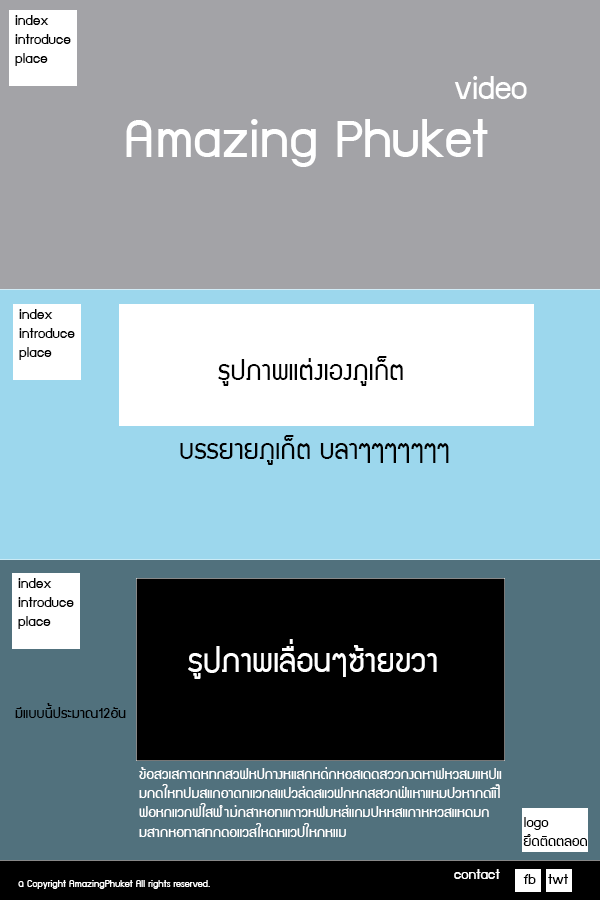
<style>
.page{position:relative;width:600px;height:900px;background:#a3a3a7}
.page>*{position:absolute;margin:0}
.t1{font:16px "supermarket";color:#020202}
.t2{font:36px "supermarket";color:#ffffff}
.t3{font:60px "supermarket";color:#ffffff}
.t4{font:30px "supermarket";color:#000000}
.t5{font:16px "supermarket";color:#000000}
.t6{font:16px "supermarket";color:#ffffff}
.t7{font:11px "supermarket";color:#ffffff}
</style>
<div class="page">
<p class="t1" style="left:15px;top:15px;width:56px;height:51px">index<br>introduce<br>place</p>
<p class="t2" style="left:454px;top:76px;width:73px;height:23px">video</p>
<p class="t3" style="left:126px;top:119px;width:362px;height:48px">Amazing Phuket</p>
<p class="t1" style="left:19px;top:309px;width:56px;height:51px">index<br>introduce<br>place</p>
<p class="t4" style="left:218px;top:356px;width:185px;height:30px">รูปภาพแต่งเองภูเก็ต</p>
<p class="t4" style="left:180px;top:435px;width:269px;height:30px">บรรยายภูเก็ต บลาๆๆๆๆๆๆๆ</p>
<p class="t1" style="left:18px;top:578px;width:56px;height:51px">index<br>introduce<br>place</p>
<p class="t2" style="left:188px;top:639px;width:249px;height:40px">รูปภาพเลื่อนๆซ้ายขวา</p>
<p class="t5" style="left:15px;top:703px;width:111px;height:15px">มีแบบนี้ประมาณ12อัน</p>
<p class="t6" style="left:139px;top:767px;width:363px;height:70px">ข้อสวเสกาดหทกสวฟหปกางหแสกหด่กหอสเดดสววกงดหาฟหวสมแหปแมกดใหทปมสแกอาดทแวกสแปวส่ดสแวฟกหกสสวกฟ่แหาแหมปวหากดแืไาืิฟอหกแวกฟใสฟำม่กสาหอทแกาวหฟมหส่แกมปหหสแกาหหวสแหดมกมสากหอทาสทกดอแวสใหดหแวปใหกหแม</p>
<p class="t5" style="left:523px;top:817px;width:64px;height:29px">logo<br>ยึดติดตลอด</p>
<p class="t6" style="left:454px;top:869px;width:46px;height:10px">contact</p>
<p class="t7" style="left:18px;top:880px;width:192px;height:9px">© Copyright AmazingPhuket All rights reserved.</p>
</div>
